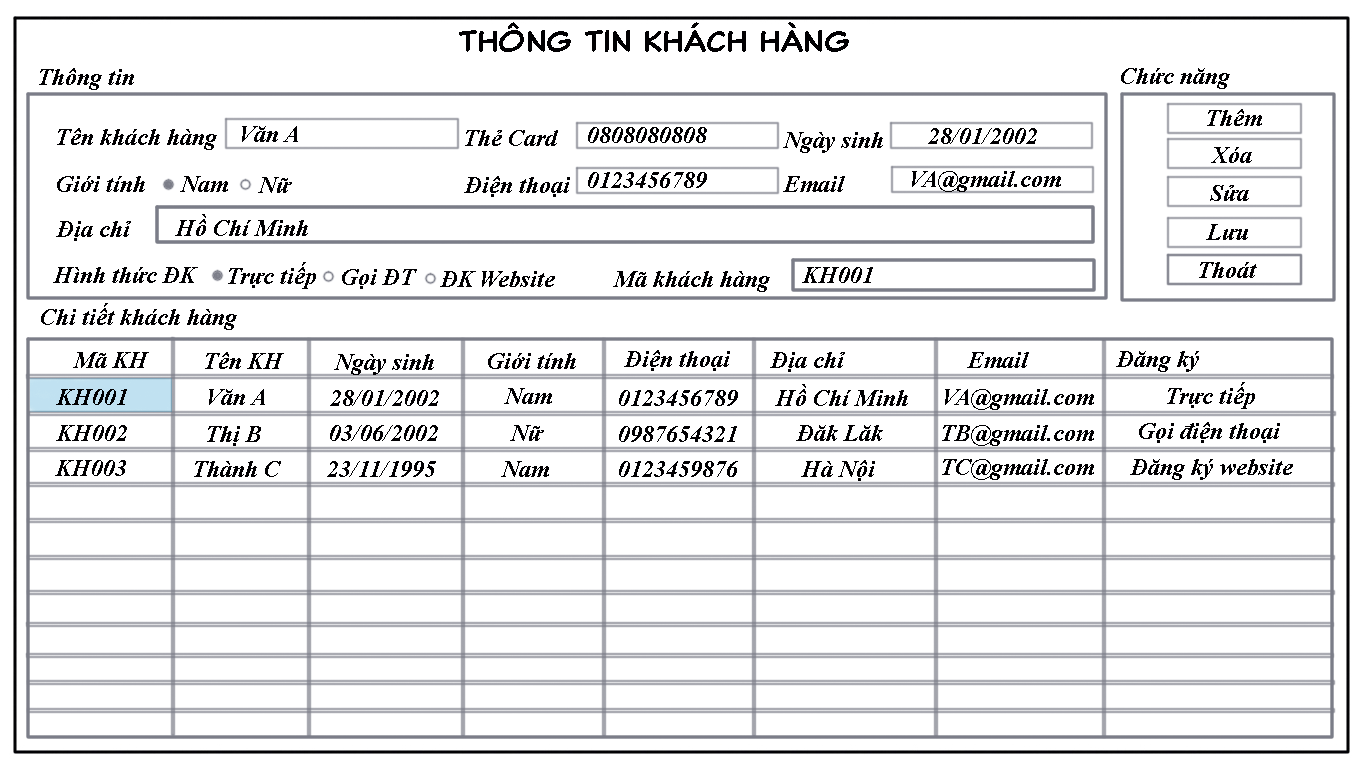
<style>
.page{position:relative;width:1366px;height:768px;background:#ffffff}
.page>*{position:absolute;margin:0}
.t1{font:30px "000ClassicComicTB-Normal";color:#010002}
.t2{font:24px "TimesNewRomanPS-BoldItalicMT";color:#010002}
</style>
<div class="page">
<p class="t1" style="left:459px;top:22px;width:390px;height:30px">thông tin khách hàng</p>
<p class="t2" style="left:39px;top:68px;width:95px;height:22px">Thông tin</p>
<p class="t2" style="left:1121px;top:68px;width:109px;height:21px">Chức năng</p>
<p class="t2" style="left:1207px;top:109px;width:55px;height:17px">Thêm</p>
<p class="t2" style="left:242px;top:126px;width:56px;height:16px">Văn A</p>
<p class="t2" style="left:57px;top:128px;width:160px;height:22px">Tên khách hàng</p>
<p class="t2" style="left:465px;top:130px;width:93px;height:16px">Thẻ Card</p>
<p class="t2" style="left:588px;top:127px;width:119px;height:16px">0808080808</p>
<p class="t2" style="left:783px;top:132px;width:100px;height:21px">Ngày sinh</p>
<p class="t2" style="left:928px;top:128px;width:109px;height:16px">28/01/2002</p>
<p class="t2" style="left:1211px;top:147px;width:41px;height:16px">Xóa</p>
<p class="t2" style="left:588px;top:172px;width:119px;height:16px">0123456789</p>
<p class="t2" style="left:912px;top:171px;width:149px;height:21px">VA@gmail.com</p>
<p class="t2" style="left:57px;top:176px;width:88px;height:16px">Giới tính</p>
<p class="t2" style="left:180px;top:176px;width:48px;height:16px">Nam</p>
<p class="t2" style="left:258px;top:177px;width:34px;height:16px">Nữ</p>
<p class="t2" style="left:464px;top:176px;width:106px;height:21px">Điện thoại</p>
<p class="t2" style="left:783px;top:176px;width:62px;height:16px">Email</p>
<p class="t2" style="left:1210px;top:185px;width:39px;height:16px">Sửa</p>
<p class="t2" style="left:56px;top:221px;width:75px;height:20px">Địa chỉ</p>
<p class="t2" style="left:175px;top:214px;width:133px;height:22px">Hồ Chí Minh</p>
<p class="t2" style="left:1206px;top:224px;width:42px;height:16px">Lưu</p>
<p class="t2" style="left:53px;top:267px;width:145px;height:16px">Hình thức ĐK</p>
<p class="t2" style="left:228px;top:262px;width:88px;height:27px">Trực tiếp</p>
<p class="t2" style="left:342px;top:269px;width:75px;height:20px">Gọi ĐT</p>
<p class="t2" style="left:802px;top:267px;width:71px;height:16px">KH001</p>
<p class="t2" style="left:1199px;top:262px;width:58px;height:16px">Thoát</p>
<p class="t2" style="left:440px;top:271px;width:115px;height:16px">ĐK Website</p>
<p class="t2" style="left:613px;top:271px;width:157px;height:21px">Mã khách hàng</p>
<p class="t2" style="left:41px;top:303px;width:196px;height:27px">Chi tiết khách hàng</p>
<p class="t2" style="left:73px;top:352px;width:76px;height:16px">Mã KH</p>
<p class="t2" style="left:205px;top:352px;width:79px;height:17px">Tên KH</p>
<p class="t2" style="left:488px;top:353px;width:88px;height:16px">Giới tính</p>
<p class="t2" style="left:624px;top:350px;width:106px;height:21px">Điện thoại</p>
<p class="t2" style="left:770px;top:352px;width:75px;height:20px">Địa chỉ</p>
<p class="t2" style="left:967px;top:352px;width:62px;height:16px">Email</p>
<p class="t2" style="left:1116px;top:351px;width:83px;height:21px">Đăng ký</p>
<p class="t2" style="left:334px;top:354px;width:100px;height:21px">Ngày sinh</p>
<p class="t2" style="left:56px;top:389px;width:71px;height:16px">KH001</p>
<p class="t2" style="left:209px;top:389px;width:56px;height:16px">Văn A</p>
<p class="t2" style="left:330px;top:390px;width:109px;height:16px">28/01/2002</p>
<p class="t2" style="left:504px;top:388px;width:48px;height:16px">Nam</p>
<p class="t2" style="left:619px;top:390px;width:119px;height:16px">0123456789</p>
<p class="t2" style="left:775px;top:384px;width:133px;height:22px">Hồ Chí Minh</p>
<p class="t2" style="left:945px;top:389px;width:149px;height:21px">VA@gmail.com</p>
<p class="t2" style="left:1167px;top:382px;width:88px;height:27px">Trực tiếp</p>
<p class="t2" style="left:56px;top:425px;width:71px;height:16px">KH002</p>
<p class="t2" style="left:330px;top:425px;width:108px;height:16px">03/06/2002</p>
<p class="t2" style="left:510px;top:425px;width:34px;height:16px">Nữ</p>
<p class="t2" style="left:796px;top:425px;width:87px;height:16px">Đăk Lăk</p>
<p class="t2" style="left:942px;top:425px;width:152px;height:21px">TB@gmail.com</p>
<p class="t2" style="left:1139px;top:422px;width:141px;height:21px">Gọi điện thoại</p>
<p class="t2" style="left:207px;top:426px;width:54px;height:20px">Thị B</p>
<p class="t2" style="left:619px;top:426px;width:118px;height:16px">0987654321</p>
<p class="t2" style="left:55px;top:460px;width:71px;height:16px">KH003</p>
<p class="t2" style="left:194px;top:461px;width:87px;height:16px">Thành C</p>
<p class="t2" style="left:327px;top:461px;width:109px;height:16px">23/11/1995</p>
<p class="t2" style="left:501px;top:461px;width:48px;height:16px">Nam</p>
<p class="t2" style="left:619px;top:461px;width:119px;height:16px">0123459876</p>
<p class="t2" style="left:801px;top:460px;width:74px;height:21px">Hà Nội</p>
<p class="t2" style="left:942px;top:459px;width:152px;height:21px">TC@gmail.com</p>
<p class="t2" style="left:1130px;top:459px;width:163px;height:21px">Đăng ký website</p>
</div>
